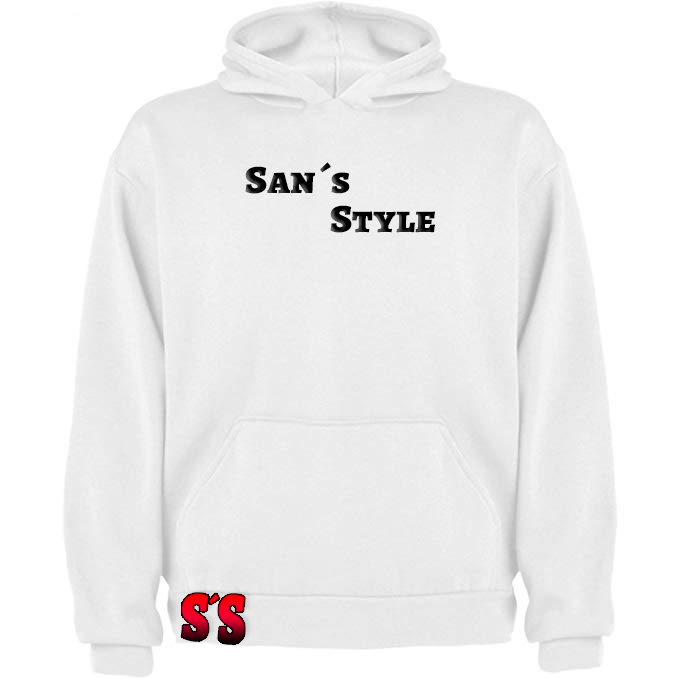
<style>
.page{position:relative;width:679px;height:679px;background:#ffffff}
.page>*{position:absolute;margin:0}
.t1{font:40px "AlegreyaSC-Black";color:#000000}
</style>
<div class="page">
<p class="t1" style="left:245px;top:162px;width:105px;height:32px">San´s</p>
<p class="t1" style="left:330px;top:205px;width:105px;height:28px">Style</p>
</div>
